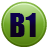
<style>
.page{position:relative;width:48px;height:48px;background:#ffffff}
.page>*{position:absolute;margin:0}
.t1{font:30px "Impact"}
</style>
<div class="page">
<p class="t1" style="left:10px;top:13px;width:26px;height:24px">B1</p>
</div>
